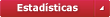
<style>
.page{position:relative;width:110px;height:17px}
.page>*{position:absolute;margin:0}
.t1{font:10px "Verdana-Bold";color:#ffffff;scale:0.92 1}
</style>
<div class="page">
<p class="t1" style="left:17px;top:3px;width:61px;height:9px">Estadísticas</p>
</div>
